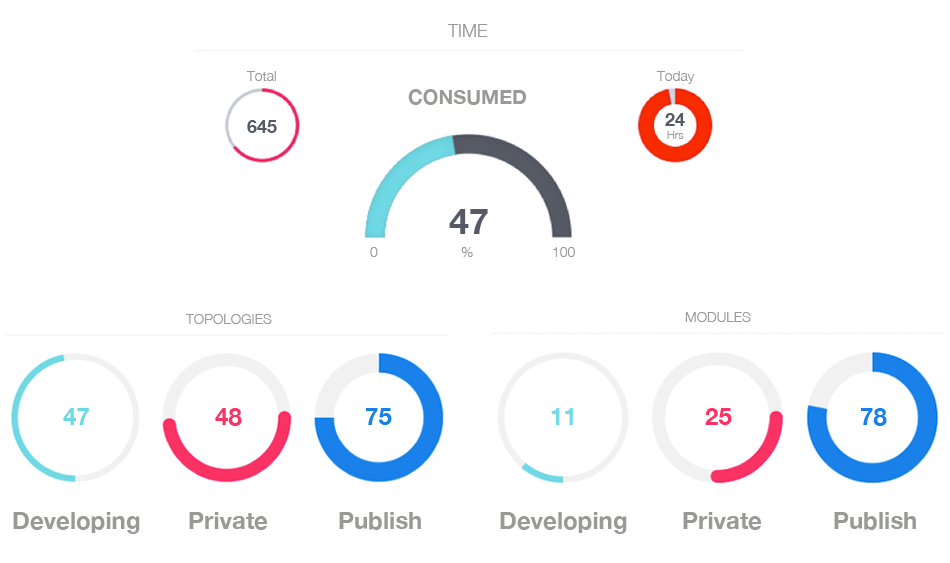
<style>
.page{position:relative;width:950px;height:563px;background:#ffffff}
.page>*{position:absolute;margin:0}
.t1{font:18px "HelveticaNeue-Light";color:#989a97}
.t2{font:14px "HelveticaNeue-Light";color:#989a97}
.t3{font:20px "HelveticaNeue-Bold";color:#989a97}
.t4{font:18px "HelveticaNeue-Bold";color:#565a65}
.t5{font:11px "HelveticaNeue-Light";color:#989a97}
.t6{font:36px "HelveticaNeue-Bold";color:#565a65}
.t7{font:24px "HelveticaNeue-Bold";color:#6cd8e2}
.t8{font:24px "HelveticaNeue-Bold";color:#f93364}
.t9{font:24px "HelveticaNeue-Bold";color:#1780e9}
.t10{font:24px "HelveticaNeue-Bold";color:#72dae5}
.t11{font:24px "HelveticaNeue-Bold";color:#fb3364}
.t12{font:24px "HelveticaNeue-Bold";color:#989a97}
</style>
<div class="page">
<p class="t1" style="left:447px;top:24px;width:41px;height:13px">TIME</p>
<p class="t2" style="left:246px;top:71px;width:30px;height:10px">Total</p>
<p class="t2" style="left:656px;top:71px;width:39px;height:13px">Today</p>
<p class="t3" style="left:408px;top:89px;width:118px;height:16px">CONSUMED</p>
<p class="t4" style="left:665px;top:113px;width:20px;height:13px">24</p>
<p class="t4" style="left:247px;top:120px;width:30px;height:13px">645</p>
<p class="t5" style="left:667px;top:131px;width:17px;height:8px">Hrs</p>
<p class="t6" style="left:449px;top:209px;width:39px;height:25px">47</p>
<p class="t2" style="left:370px;top:247px;width:8px;height:10px">0</p>
<p class="t2" style="left:461px;top:247px;width:12px;height:10px">%</p>
<p class="t2" style="left:553px;top:247px;width:22px;height:10px">100</p>
<p class="t2" style="left:185px;top:314px;width:87px;height:10px">TOPOLOGIES</p>
<p class="t2" style="left:685px;top:312px;width:66px;height:10px">MODULES</p>
<p class="t7" style="left:63px;top:408px;width:26px;height:17px">47</p>
<p class="t8" style="left:215px;top:408px;width:27px;height:18px">48</p>
<p class="t9" style="left:366px;top:408px;width:26px;height:17px">75</p>
<p class="t10" style="left:551px;top:408px;width:22px;height:17px">11</p>
<p class="t11" style="left:705px;top:408px;width:27px;height:17px">25</p>
<p class="t9" style="left:861px;top:408px;width:26px;height:18px">78</p>
<p class="t12" style="left:13px;top:512px;width:127px;height:22px">Developing</p>
<p class="t12" style="left:189px;top:512px;width:79px;height:18px">Private</p>
<p class="t12" style="left:339px;top:512px;width:82px;height:18px">Publish</p>
<p class="t12" style="left:500px;top:512px;width:127px;height:22px">Developing</p>
<p class="t12" style="left:683px;top:512px;width:79px;height:18px">Private</p>
<p class="t12" style="left:834px;top:512px;width:82px;height:18px">Publish</p>
</div>
